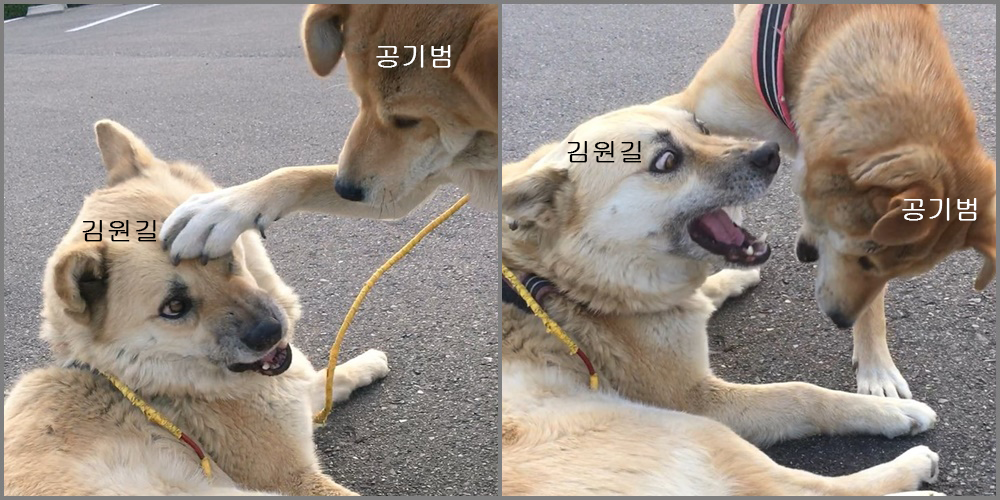
<style>
.page{position:relative;width:1000px;height:500px}
.page>*{position:absolute;margin:0}
.t1{font:20.1px "Gulim";color:#ffffff;font-weight:bold}
.t2{font:19.3px "Gulim";color:#010101;font-weight:bold}
</style>
<div class="page">
<p class="t1" style="left:376px;top:45px;width:75px;height:23px">공기범</p>
<p class="t2" style="left:567px;top:141px;width:75px;height:22px">김원길</p>
<p class="t1" style="left:902px;top:198px;width:75px;height:23px">공기범</p>
<p class="t2" style="left:82px;top:220px;width:75px;height:22px">김원길</p>
</div>
